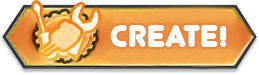
<style>
.page{position:relative;width:259px;height:75px;background:#ffffff}
.page>*{position:absolute;margin:0}
.t1{font:36px "Junegull";color:#ffffff}
</style>
<div class="page">
<p class="t1" style="left:110px;top:25px;width:117px;height:22px">CREATE!</p>
</div>
